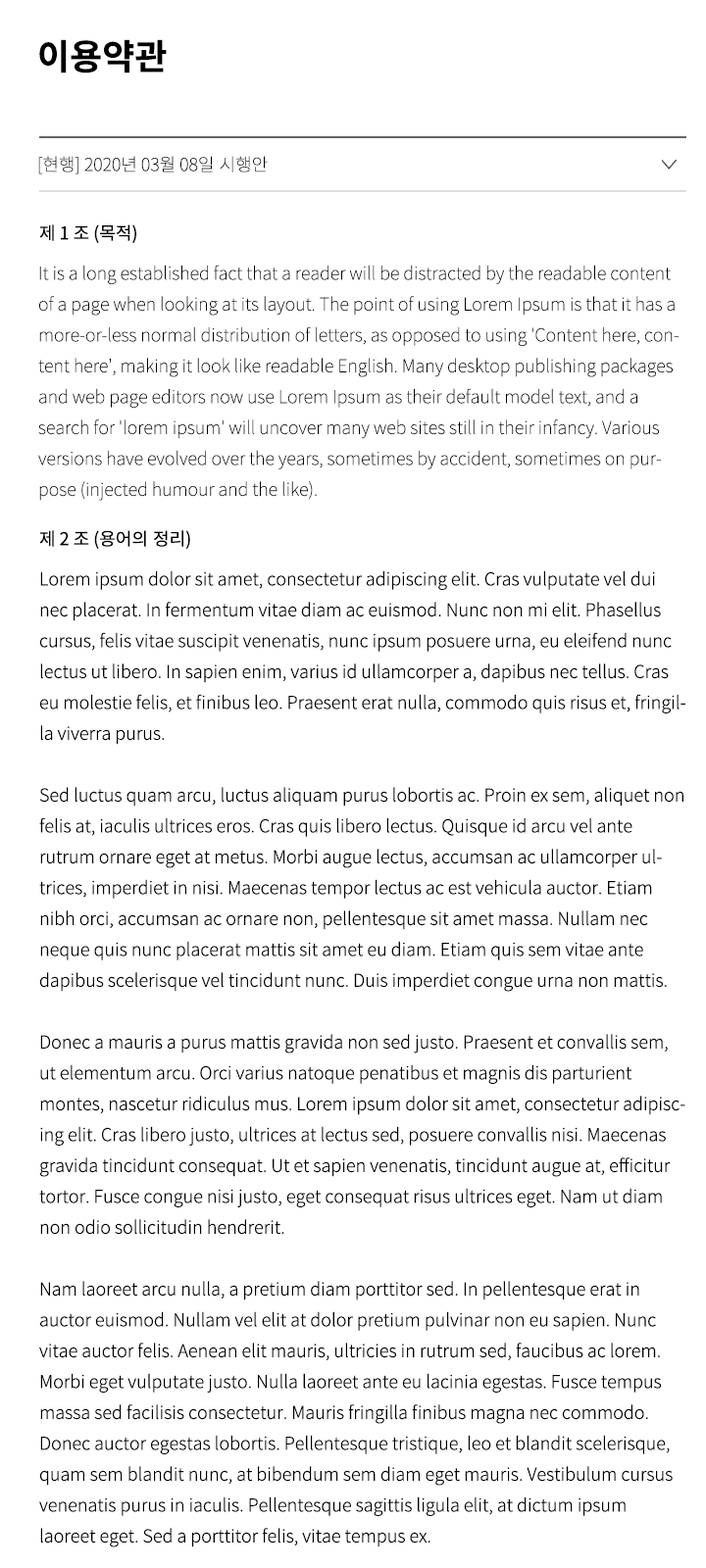
<style>
.page{position:relative;width:706px;height:1568px;background:#ffffff}
.page>*{position:absolute;margin:0}
.t1{font:35.3px "NotoSansCJKkr-Bold";color:#000000}
.t2{font:17.6px "NotoSansCJKkr-Thin";color:#000000}
.t3{font:17.6px "NotoSansCJKkr-Regular";color:#000000}
.t4{font:17.6px "NotoSansCJKkr-Light";color:#000000}
</style>
<div class="page">
<p class="t1" style="left:39px;top:39px;width:128px;height:35px">이용약관</p>
<p class="t2" style="left:38px;top:156px;width:230px;height:18px">[현행] 2020년 03월 08일 시행안</p>
<p class="t3" style="left:39px;top:224px;width:97px;height:19px">제 1 조 (목적)</p>
<p class="t2" style="left:38px;top:265px;width:640px;height:236px">It is a long established fact that a reader will be distracted by the readable content of a page when looking at its layout. The point of using Lorem Ipsum is that it has a more-or-less normal distribution of letters, as opposed to using 'Content here, content here', making it look like readable English. Many desktop publishing packages and web page editors now use Lorem Ipsum as their default model text, and a search for 'lorem ipsum' will uncover many web sites still in their infancy. Various versions have evolved over the years, sometimes by accident, sometimes on purpose (injected humour and the like).</p>
<p class="t3" style="left:39px;top:530px;width:151px;height:19px">제 2 조 (용어의 정리)</p>
<p class="t4" style="left:39px;top:570px;width:646px;height:977px">Lorem ipsum dolor sit amet, consectetur adipiscing elit. Cras vulputate vel dui nec placerat. In fermentum vitae diam ac euismod. Nunc non mi elit. Phasellus cursus, felis vitae suscipit venenatis, nunc ipsum posuere urna, eu eleifend nunc lectus ut libero. In sapien enim, varius id ullamcorper a, dapibus nec tellus. Cras eu molestie felis, et finibus leo. Praesent erat nulla, commodo quis risus et, fringilla viverra purus.<br><br>Sed luctus quam arcu, luctus aliquam purus lobortis ac. Proin ex sem, aliquet non felis at, iaculis ultrices eros. Cras quis libero lectus. Quisque id arcu vel ante rutrum ornare eget at metus. Morbi augue lectus, accumsan ac ullamcorper ultrices, imperdiet in nisi. Maecenas tempor lectus ac est vehicula auctor. Etiam nibh orci, accumsan ac ornare non, pellentesque sit amet massa. Nullam nec neque quis nunc placerat mattis sit amet eu diam. Etiam quis sem vitae ante dapibus scelerisque vel tincidunt nunc. Duis imperdiet congue urna non mattis.<br><br>Donec a mauris a purus mattis gravida non sed justo. Praesent et convallis sem, ut elementum arcu. Orci varius natoque penatibus et magnis dis parturient montes, nascetur ridiculus mus. Lorem ipsum dolor sit amet, consectetur adipiscing elit. Cras libero justo, ultrices at lectus sed, posuere convallis nisi. Maecenas gravida tincidunt consequat. Ut et sapien venenatis, tincidunt augue at, efficitur tortor. Fusce congue nisi justo, eget consequat risus ultrices eget. Nam ut diam non odio sollicitudin hendrerit.<br><br>Nam laoreet arcu nulla, a pretium diam porttitor sed. In pellentesque erat in auctor euismod. Nullam vel elit at dolor pretium pulvinar non eu sapien. Nunc vitae auctor felis. Aenean elit mauris, ultricies in rutrum sed, faucibus ac lorem. Morbi eget vulputate justo. Nulla laoreet ante eu lacinia egestas. Fusce tempus massa sed facilisis consectetur. Mauris fringilla finibus magna nec commodo. Donec auctor egestas lobortis. Pellentesque tristique, leo et blandit scelerisque, quam sem blandit nunc, at bibendum sem diam eget mauris. Vestibulum cursus venenatis purus in iaculis. Pellentesque sagittis ligula elit, at dictum ipsum laoreet eget. Sed a porttitor felis, vitae tempus ex.<br><br>Integer sit amet pulvinar sem. Cras tempor tincidunt tellus, sed ullamcorper tellus congue a. Integer semper tellus eget efficitur vestibulum. Nunc aliquam bibendum dictum. Integer vehicula convallis ipsum, vitae posuere dui. Ut in ligula eu nisi accumsan sodales sed in lorem. Cras eget ullamcorper nunc. Nullam vitae augue augue. Duis auctor quam vitae sodales ornare. Nam molestie tincidunt fringilla.<br><br>Ut et nunc nec velit porta molestie sed ut risus. Pellentesque rhoncus pellentesque sapien et aliquet. Integer volutpat velit sed vulputate auctor. Proin eget bibendum neque. Mauris felis turpis, mattis at varius nec, accumsan et dui. Morbi et libero commodo, luctus sem vel, sodales enim. Morbi condimentum sodales lorem sed euismod. Donec accumsan eleifend feugiat.<br><br>In ex ante, maximus consectetur enim non, elementum ultricies tortor. Nullam nec lectus arcu. Ut tristique commodo metus a iaculis. Vivamus elementum dui quis ipsum vehicula sollicitudin. Pellentesque vitae mollis tortor. Quisque in nulla vel enim blandit aliquam vel ut nibh. In hac habitasse platea dictumst. Integer id lectus quis elit finibus accumsan. Phasellus feugiat mauris a arcu semper, vel sagittis ligula placerat. Etiam faucibus turpis id diam interdum, eget vehicula sem tempor. Nulla lacinia justo vitae ex hendrerit mattis. Fusce fringilla sapien eros, vel scelerisque urna pellentesque sed. Fusce euismod metus ac molestie posuere. Praesent blandit ultricies arcu, vitae imperdiet justo. Sed placerat ipsum sapien. Aenean pretium accumsan arcu a placerat.<br><br>Nullam eget sollicitudin ante, eu ultricies dolor. Curabitur ac libero turpis. Fusce blandit suscipit tellus sed luctus. Aenean eget ligula ut neque imperdiet pellentesque. Proin sagittis vulputate aliquam. Aenean mollis nec diam a pulvinar. Proin imperdiet volutpat justo nec malesuada. Fusce quis ligula sapien. Morbi gravida eros in ex tincidunt, at bibendum lacus semper. Vestibulum eros magna, bibendum vel nisl quis, faucibus convallis sem. Integer fringilla lectus tincidunt nibh pulvinar, finibus pulvinar felis rutrum. Nulla porttitor ac arcu at pharetra. Nunc venenatis lacinia tincidunt. Proin at aliquet eros, ac laoreet mi. Suspendisse eleifend tortor quis porttitor posuere.<br><br>Duis non nisi vel odio posuere venenatis. Sed odio dui, vulputate sit amet condimentum vel, viverra sit amet nibh. Sed quis ante euismod, laoreet dolor vitae, cursus elit. Pellentesque ultrices tellus volutpat elit malesuada sodales. Fusce molestie suscipit tellus eu gravida. Donec tempus, leo accumsan tincidunt ultrices, sapien lorem vestibulum odio, eu auctor augue purus elementum nisl. Quisque nunc mauris, imperdiet quis tempor vitae, pharetra non leo. Pellentesque condimentum consequat justo, sit amet vestibulum dui egestas ac.<br><br>Aliquam malesuada commodo sem, sed convallis leo tincidunt vitae. Vestibulum et vestibulum urna. Donec ultrices eu sapien at venenatis. Nulla et mattis nisl. Integer dictum, neque sed consequat tincidunt, turpis diam tristique sapien, non pulvinar tellus magna sit amet ipsum. Nullam sed dignissim sapien. Maecenas porttitor enim vehicula augue varius, vel tincidunt massa viverra. Nam nec nunc id massa gravida bibendum. Etiam eu arcu non nisl ultrices feugiat. Integer vitae odio turpis. Praesent egestas volutpat elit, commodo sollicitudin lorem mattis a. Nulla at mauris tempor, porttitor odio ut, porttitor justo. Proin quis quam sit amet mi rutrum tristique vel in elit. Etiam lacinia condimentum ultricies.</p>
</div>
